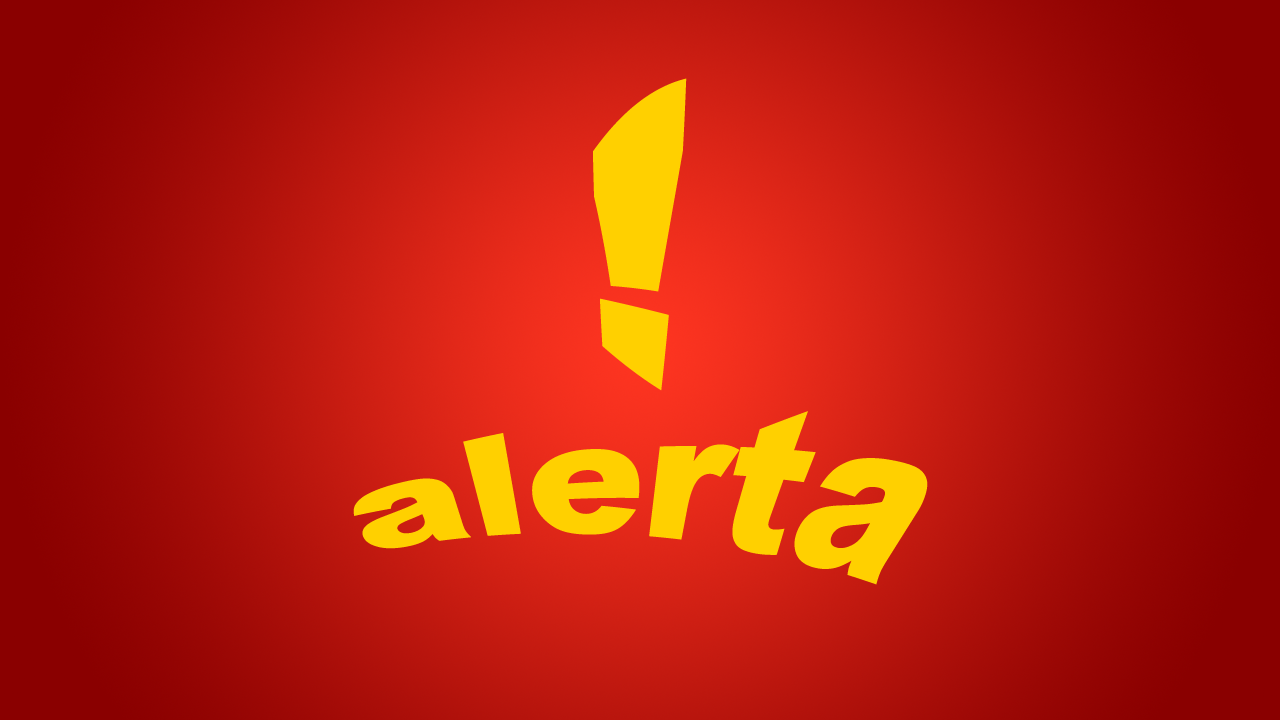
<style>
.page{position:relative;width:1280px;height:720px}
.page>*{position:absolute;margin:0}
.t1{font:320px "Arial-Black";color:#ffd000}
.t2{font:160px "Arial-Black";color:#ffd000}
</style>
<div class="page">
<p class="t1" style="left:593px;top:78px;width:94px;height:313px">!</p>
<p class="t2" style="left:353px;top:411px;width:575px;height:174px">alerta</p>
</div>
